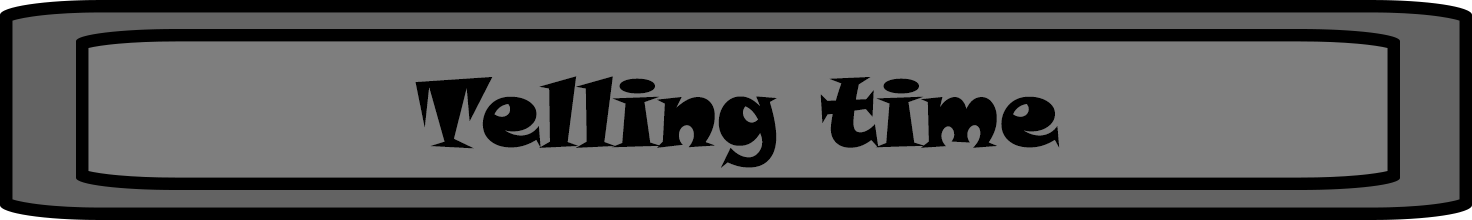
<style>
.page{position:relative;width:1472px;height:220px;background:#7e7e7e}
.page>*{position:absolute;margin:0}
.t1{font:95px "SnapITC-Regular";color:#000000}
</style>
<div class="page">
<p class="t1" style="left:415px;top:76px;width:645px;height:92px">Telling time</p>
</div>
